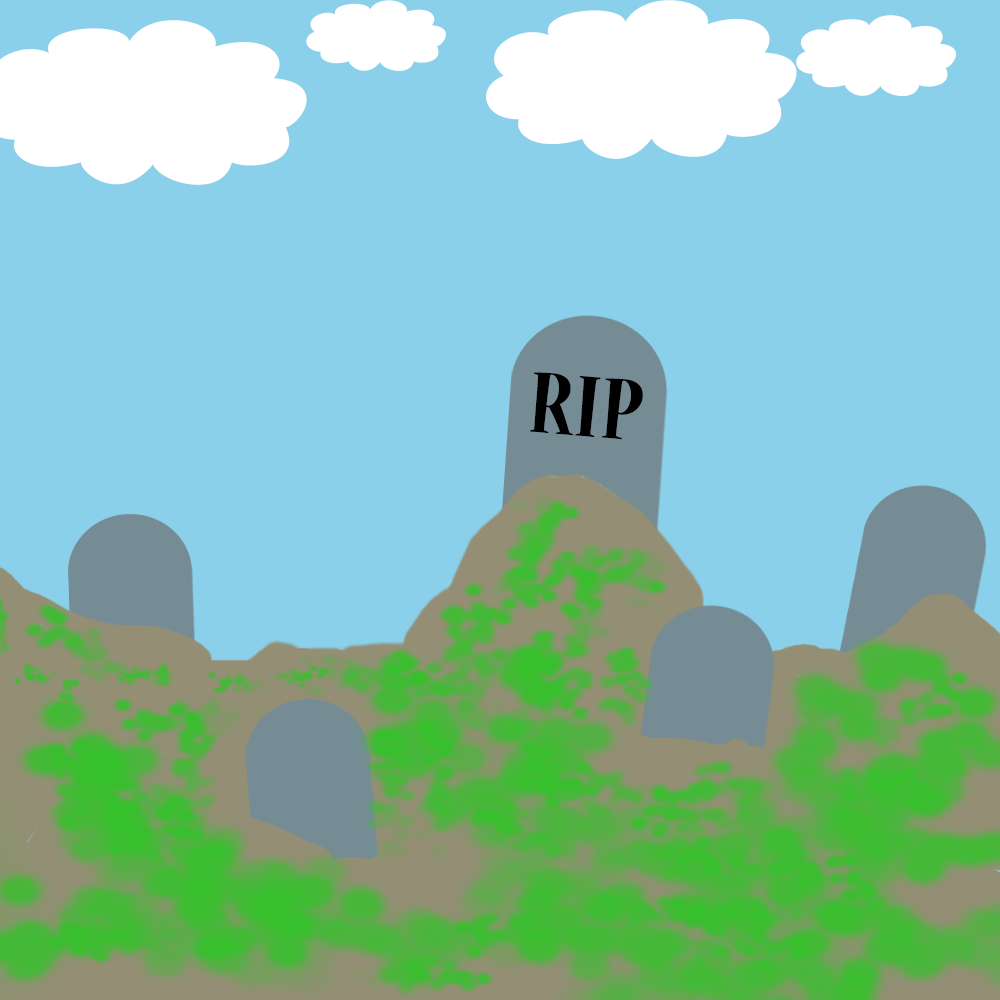
<style>
.page{position:relative;width:1000px;height:1000px;background:#8bd0ea}
.page>*{position:absolute;margin:0}
.t1{font:96.7px "NuevaStd-BoldCond";color:#000000}
</style>
<div class="page">
<p class="t1" style="left:530px;top:372px;width:113px;height:68px;rotate:5deg">RIP</p>
</div>
